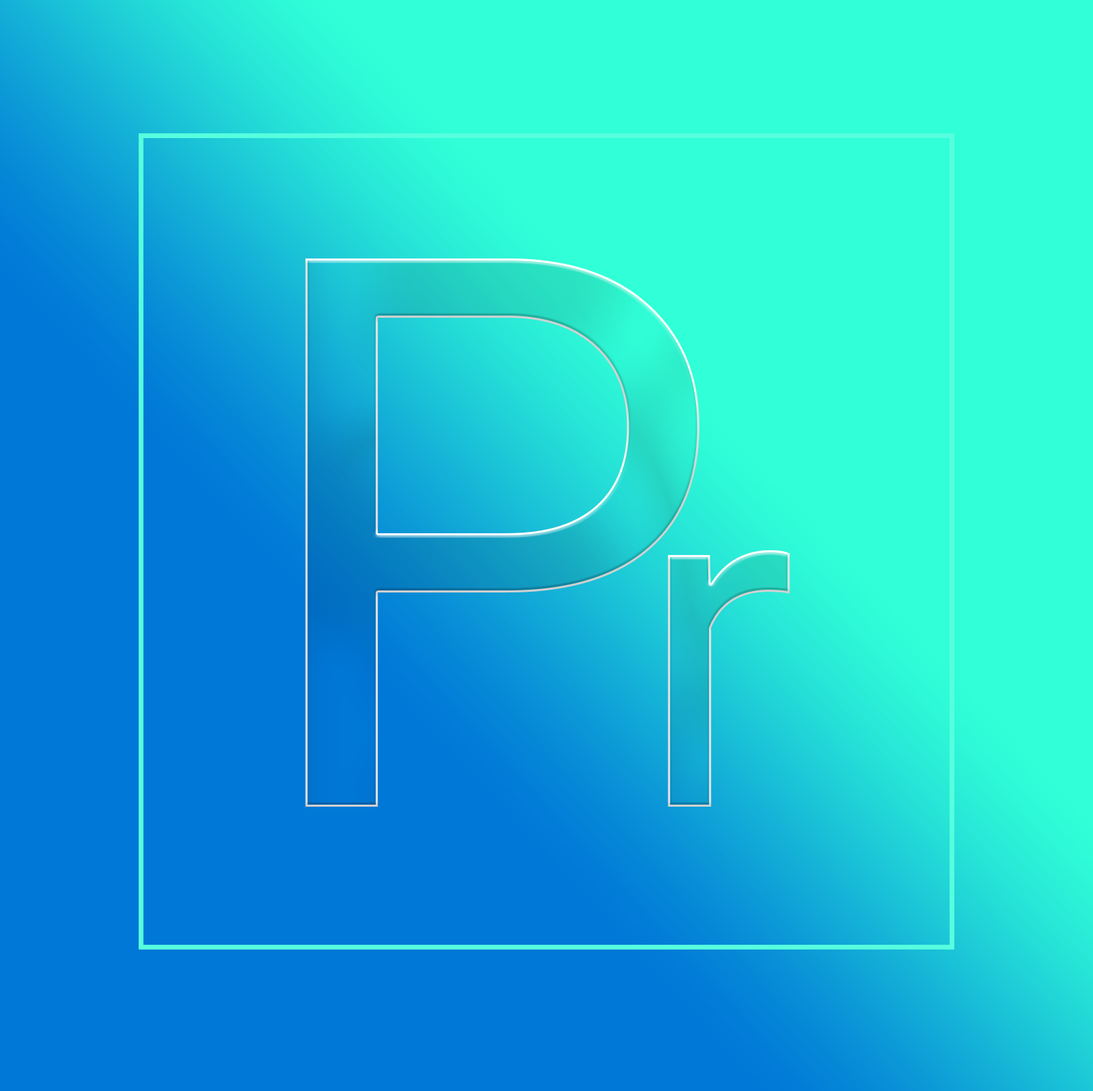
<style>
.page{position:relative;width:1093px;height:1091px;background:#30ffd7}
.page>*{position:absolute;margin:0}
.t1{font:770.6px "Roboto-Regular";letter-spacing:-0.12em}
.t2{font:476px "Roboto-Regular";letter-spacing:-0.12em}
</style>
<div class="page">
<p class="t1" style="left:305px;top:258px;width:485px;height:548px">P<span class="t2">r</span></p>
</div>
